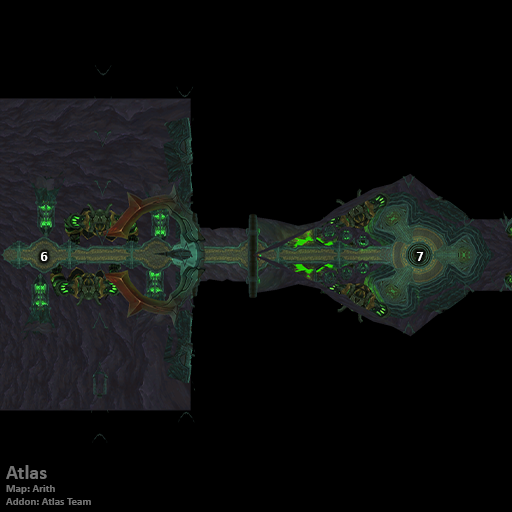
<style>
.page{position:relative;width:512px;height:512px;background:#000000}
.page>*{position:absolute;margin:0}
.t1{font:14px "Calibri-Bold";color:#ffffff}
.t2{font:11px "Calibri-Bold";color:#747474}
.t3{font:20px "Calibri-Bold";color:#747474}
</style>
<div class="page">
<p class="t1" style="left:41px;top:252px;width:7px;height:9px">6</p>
<p class="t1" style="left:416px;top:252px;width:8px;height:9px">7</p>
<p class="t2" style="left:6px;top:465px;width:85px;height:40px"><span class="t3">Atlas<br></span>Map: Arith<br>Addon: Atlas Team</p>
</div>
